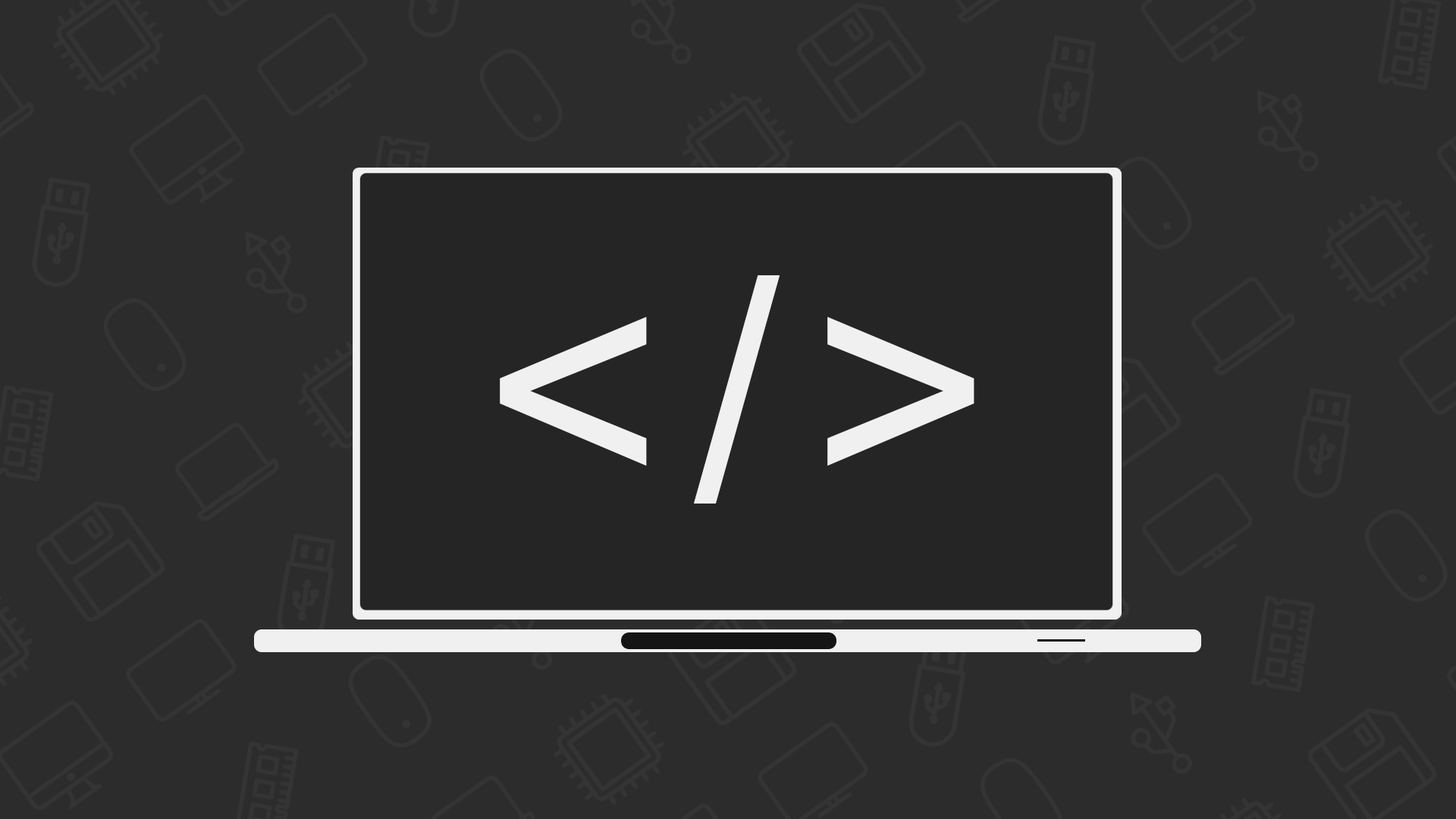
<style>
.page{position:relative;width:1456px;height:819px;background:#2c2c2c}
.page>*{position:absolute;margin:0}
.t1{font:308.6px "ArialMT";letter-spacing:0.1em;color:#f0f0f0}
</style>
<div class="page">
<p class="t1" style="left:500px;top:275px;width:474px;height:229px">&lt;/&gt;</p>
</div>
